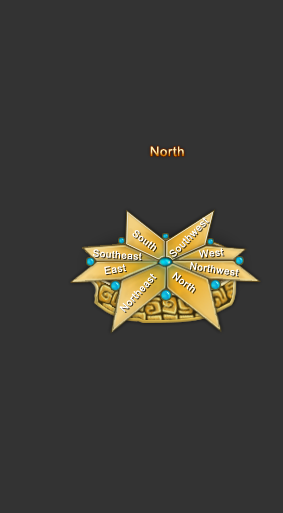
<style>
.page{position:relative;width:283px;height:513px;background:#333333}
.page>*{position:absolute;margin:0}
.t1{font:13px "ArialMT";letter-spacing:0.05em}
.t2{font:10px "ArialMT";letter-spacing:0.05em;color:#ffffff}
</style>
<div class="page">
<p class="t1" style="left:150px;top:146px;width:34px;height:11px">North</p>
<p class="t2" style="left:169px;top:217px;width:40px;height:40px;rotate:-46deg">Southwest</p>
<p class="t2" style="left:132px;top:230px;width:24px;height:22px;rotate:37deg">South</p>
<p class="t2" style="left:93px;top:249px;width:49px;height:12px;rotate:4deg">Southeast</p>
<p class="t2" style="left:198px;top:248px;width:26px;height:10px;rotate:-5deg">West</p>
<p class="t2" style="left:104px;top:264px;width:22px;height:11px;rotate:-9deg">East</p>
<p class="t2" style="left:190px;top:262px;width:49px;height:15px;rotate:8deg">Northwest</p>
<p class="t2" style="left:119px;top:273px;width:38px;height:39px;rotate:-48deg">Northeast</p>
<p class="t2" style="left:172px;top:272px;width:23px;height:21px;rotate:36deg">North</p>
</div>
